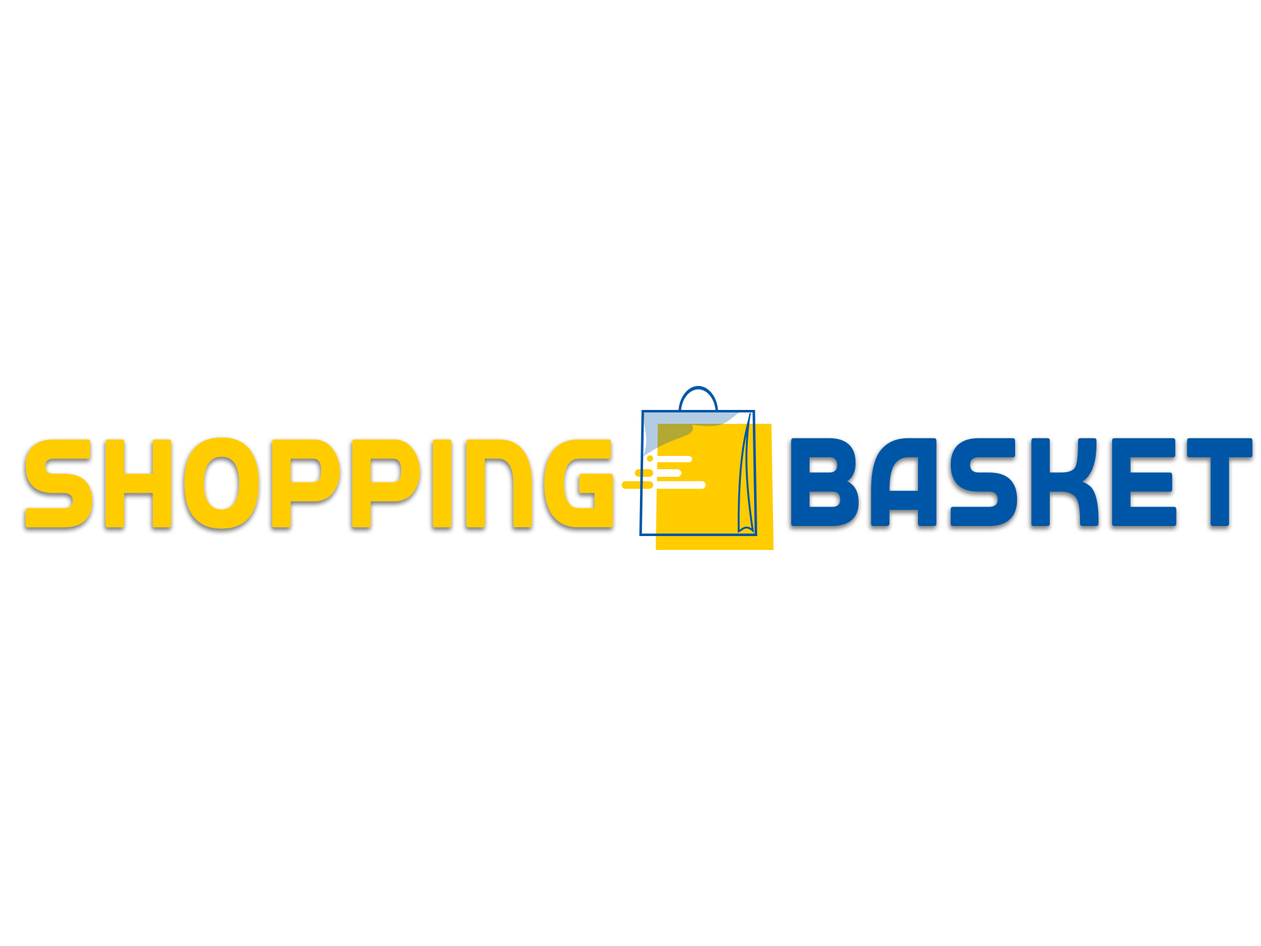
<style>
.page{position:relative;width:1261px;height:946px;background:#ffffff}
.page>*{position:absolute;margin:0}
.t1{font:119.4px "aAutobusOmnibus";color:#ffcc00;scale:0.85 1}
.t2{font:119.4px "aAutobusOmnibus";color:#0056a6;scale:0.85 1}
</style>
<div class="page">
<p class="t1" style="left:25px;top:437px;width:588px;height:92px">Shopping</p>
<p class="t2" style="left:791px;top:438px;width:462px;height:88px">Basket</p>
</div>
